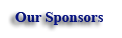
<style>
.page{position:relative;width:122px;height:38px;background:#ffffff}
.page>*{position:absolute;margin:0}
.t1{font:15px "TimesNewRomanPS-BoldMT";color:#07127d}
</style>
<div class="page">
<p class="t1" style="left:15px;top:12px;width:88px;height:13px">Our Sponsors</p>
</div>
